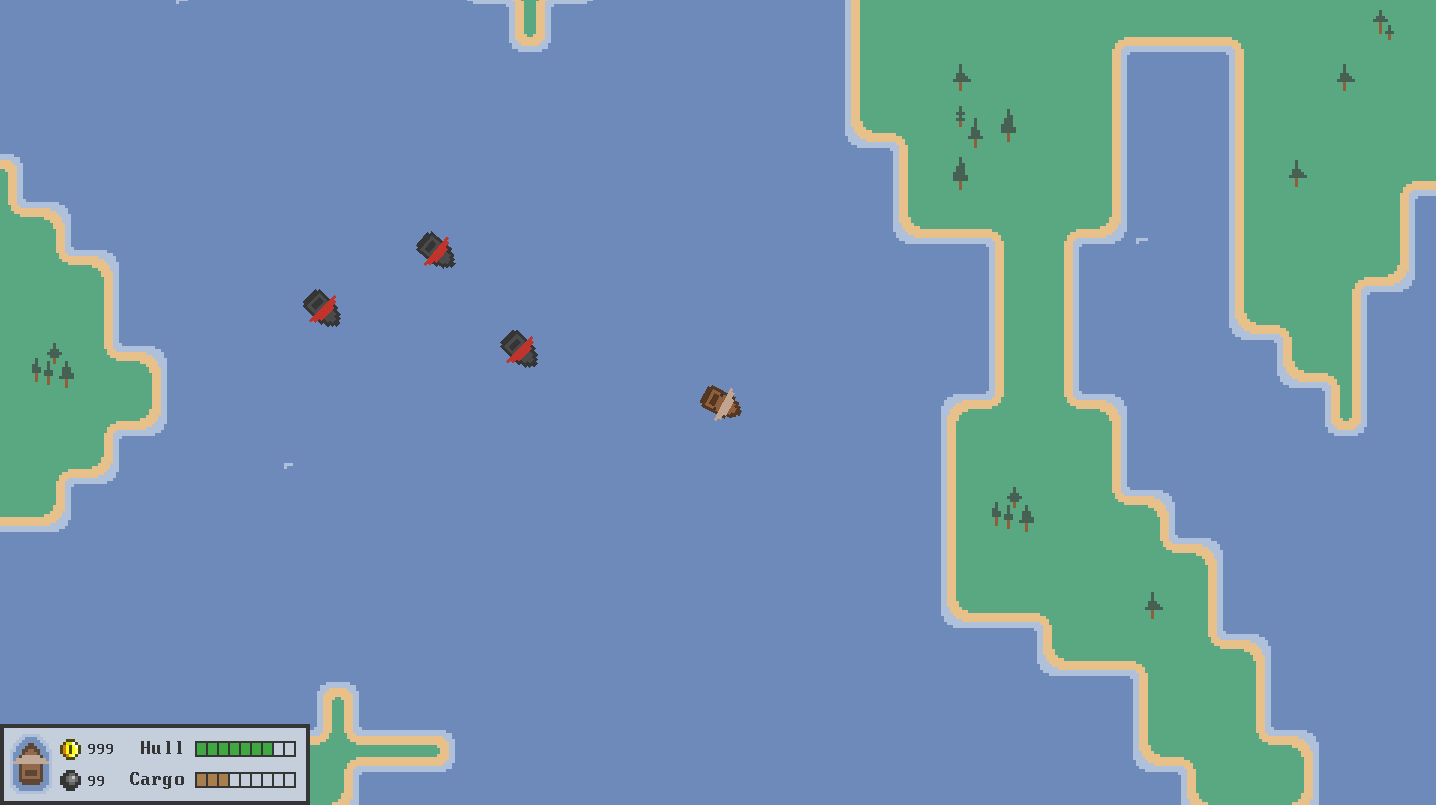
<style>
.page{position:relative;width:1436px;height:805px;background:#6e8aba}
.page>*{position:absolute;margin:0}
.t1{font:16px "PerfectDOSVGA437Win";color:#353535}
.t2{font:20px "PerfectDOSVGA437Win";color:#353535}
</style>
<div class="page">
<p class="t1" style="left:88px;top:744px;width:25px;height:10px">999</p>
<p class="t2" style="left:141px;top:741px;width:41px;height:13px">Hull</p>
<p class="t2" style="left:130px;top:772px;width:54px;height:17px">Cargo</p>
<p class="t1" style="left:88px;top:776px;width:16px;height:10px">99</p>
</div>
